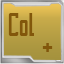
<style>
.page{position:relative;width:64px;height:64px}
.page>*{position:absolute;margin:0}
.t1{font:28px "SAOWelcomeTT-Regular";color:#82570b;scale:0.95 1}
</style>
<div class="page">
<p class="t1" style="left:8px;top:13px;width:26px;height:23px">Col</p>
<p class="t1" style="left:42px;top:43px;width:11px;height:9px">+</p>
</div>
